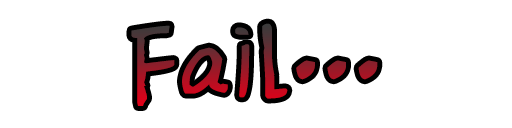
<style>
.page{position:relative;width:512px;height:128px;background:#ffffff}
.page>*{position:absolute;margin:0}
.t1{font:120px "SentyMARUKO"}
</style>
<div class="page">
<p class="t1" style="left:131px;top:23px;width:247px;height:83px">Fail...</p>
</div>
